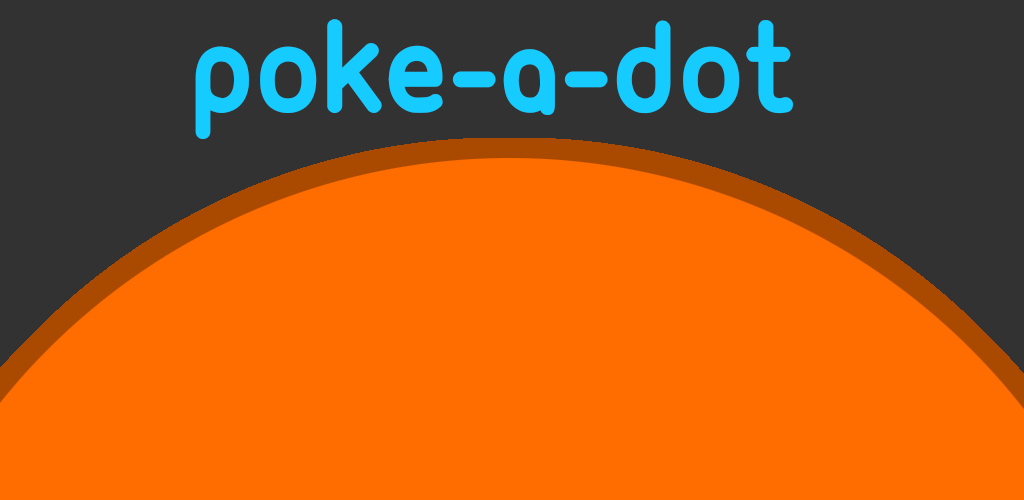
<style>
.page{position:relative;width:1024px;height:500px;background:#ff6d00}
.page>*{position:absolute;margin:0}
.t1{font:140px "Ubuntu-Title";color:#15cbff}
</style>
<div class="page">
<p class="t1" style="left:195px;top:19px;width:598px;height:121px">Poke-A-Dot</p>
</div>
